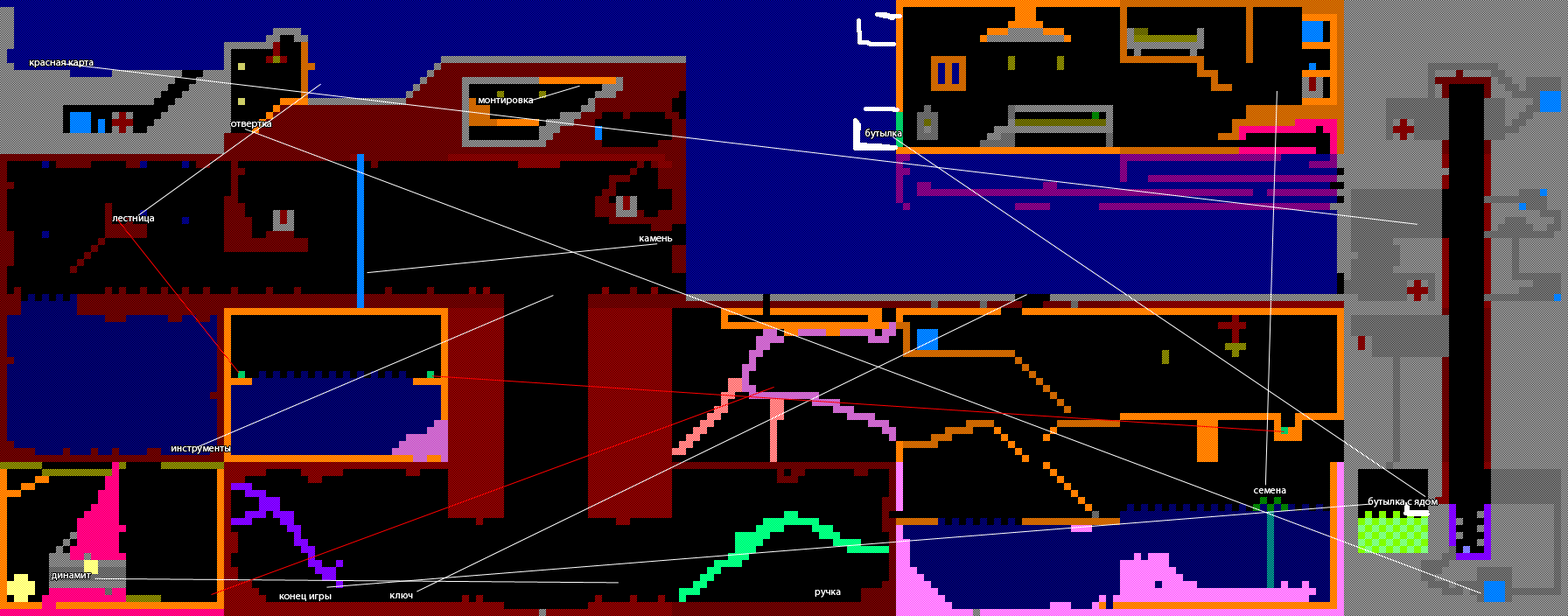
<style>
.page{position:relative;width:1568px;height:616px;background:#000000}
.page>*{position:absolute;margin:0}
.t1{font:10.5px "MyriadPro-Regular";color:#ffffff}
</style>
<div class="page">
<p class="t1" style="left:30px;top:60px;width:64px;height:7px">красная карта</p>
<p class="t1" style="left:479px;top:98px;width:54px;height:7px">монтировка</p>
<p class="t1" style="left:231px;top:122px;width:40px;height:7px">отвертка</p>
<p class="t1" style="left:865px;top:129px;width:37px;height:10px">бутылка</p>
<p class="t1" style="left:112px;top:216px;width:42px;height:7px">лестница</p>
<p class="t1" style="left:640px;top:236px;width:33px;height:6px">камень</p>
<p class="t1" style="left:172px;top:446px;width:59px;height:8px">инструменты</p>
<p class="t1" style="left:1254px;top:488px;width:32px;height:6px">семена</p>
<p class="t1" style="left:1368px;top:497px;width:70px;height:11px">бутылка с ядом</p>
<p class="t1" style="left:52px;top:573px;width:39px;height:7px">динамит</p>
<p class="t1" style="left:390px;top:593px;width:23px;height:5px">ключ</p>
<p class="t1" style="left:815px;top:590px;width:26px;height:8px">ручка</p>
<p class="t1" style="left:279px;top:594px;width:53px;height:7px">конец игры</p>
</div>
